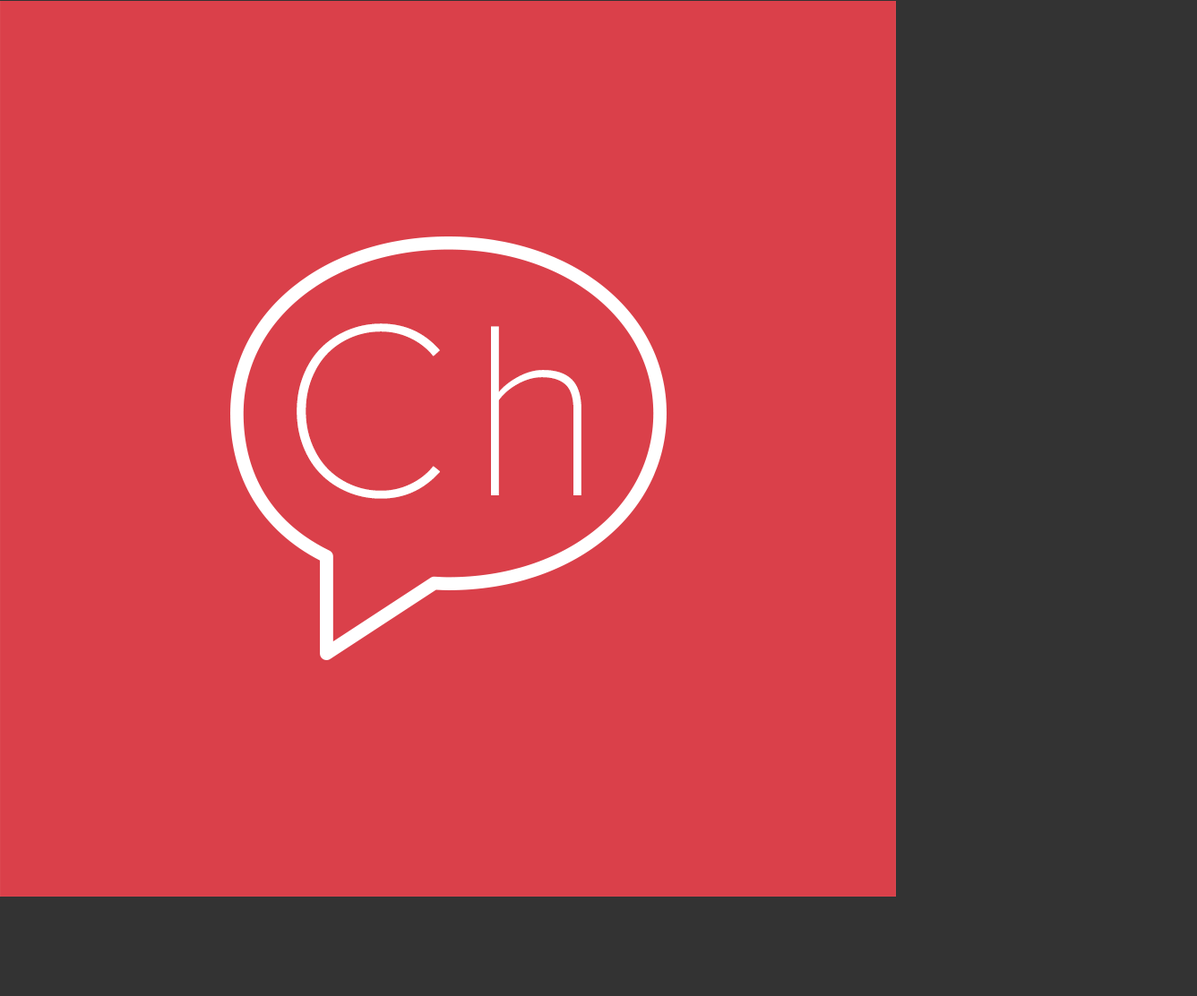
<style>
.page{position:relative;width:1197px;height:996px;background:#da404a}
.page>*{position:absolute;margin:0}
.t1{font:252.8px "ProximaNovaT-Thin";letter-spacing:0.08em;color:#ffffff}
</style>
<div class="page">
<p class="t1" style="left:297px;top:323px;width:284px;height:176px">Ch</p>
</div>
